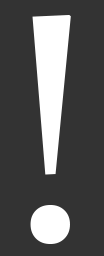
<style>
.page{position:relative;width:104px;height:256px;background:#333333}
.page>*{position:absolute;margin:0}
.t1{font:336px "Constantia";color:#ffffff}
</style>
<div class="page">
<p class="t1" style="left:30px;top:15px;width:41px;height:229px">!</p>
</div>
